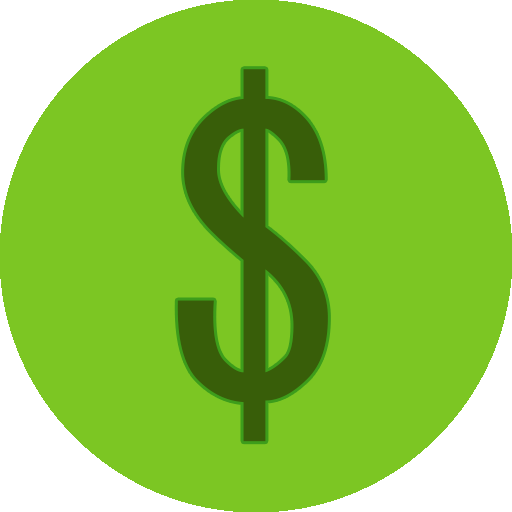
<style>
.page{position:relative;width:512px;height:512px;background:#7cc623}
.page>*{position:absolute;margin:0}
.t1{font:400px "MS-Gothic";color:#385e09}
</style>
<div class="page">
<p class="t1" style="left:177px;top:69px;width:151px;height:373px">$</p>
</div>
